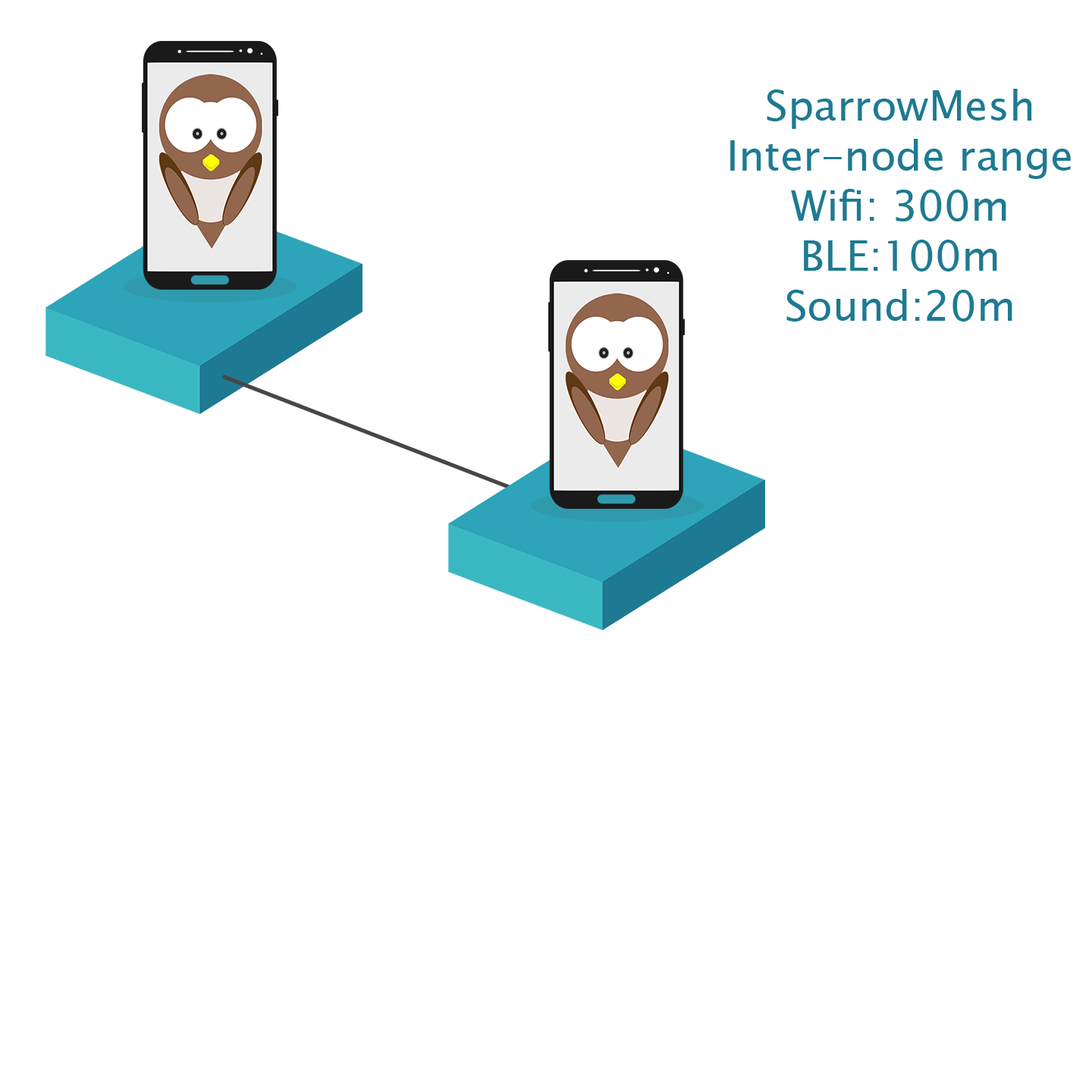
<style>
.page{position:relative;width:1092px;height:1092px;background:#ffffff}
.page>*{position:absolute;margin:0}
.t1{font:41.7px "LucidaSansUnicode";color:#1e7a92}
</style>
<div class="page">
<p class="t1" style="left:730px;top:89px;width:341px;height:233px;text-align:center">SparrowMesh<br>Inter-node range<br>Wifi: 300m<br>BLE:100m<br>Sound:20m</p>
</div>
